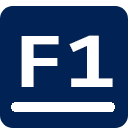
<style>
.page{position:relative;width:129px;height:128px;background:#002255}
.page>*{position:absolute;margin:0}
.t1{font:79.9px "Consolas-Bold";letter-spacing:-0.02em;color:#ffffff;scale:1.22 1}
</style>
<div class="page">
<p class="t1" style="left:21px;top:35px;width:92px;height:52px">F1</p>
</div>
